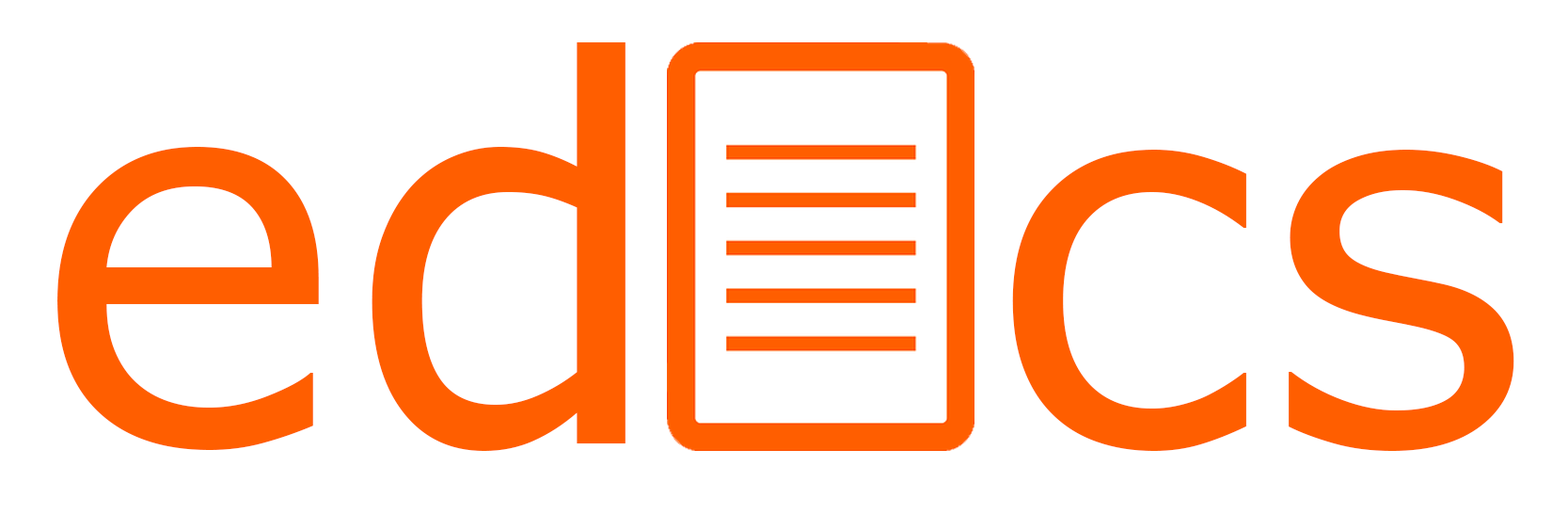
<style>
.page{position:relative;width:1568px;height:514px;background:#ffffff}
.page>*{position:absolute;margin:0}
.t1{font:527.6px "Verdana";color:#ff5e00}
</style>
<div class="page">
<p class="t1" style="left:57px;top:42px;width:569px;height:409px">ed</p>
<p class="t1" style="left:1012px;top:150px;width:502px;height:301px">cs</p>
</div>
